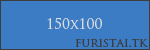
<style>
.page{position:relative;width:150px;height:50px;background:#3b7cc4}
.page>*{position:absolute;margin:0}
.t1{font:14px "TrajanPro-Regular";color:#dcddde}
.t2{font:12px "TrajanPro-Regular";color:#3d3d3d}
</style>
<div class="page">
<p class="t1" style="left:47px;top:18px;width:55px;height:11px">150x100</p>
<p class="t2" style="left:76px;top:39px;width:72px;height:8px">furistai.tk</p>
</div>
